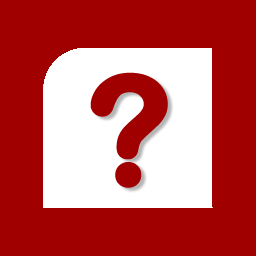
<style>
.page{position:relative;width:256px;height:256px;background:#a00000}
.page>*{position:absolute;margin:0}
.t1{font:150px "ArialRoundedMTBold";letter-spacing:0.025em;color:#a00000;font-weight:bold}
</style>
<div class="page">
<p class="t1" style="left:90px;top:72px;width:78px;height:116px">?</p>
</div>
